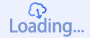
<style>
.page{position:relative;width:90px;height:38px;background:#edf1fe}
.page>*{position:absolute;margin:0}
.t1{font:18px "AdobeHeitiStd-Regular";letter-spacing:-0.025em;color:#7c99d6}
</style>
<div class="page">
<p class="t1" style="left:10px;top:17px;width:75px;height:20px">Loading...</p>
</div>
